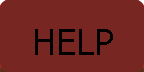
<style>
.page{position:relative;width:144px;height:72px;background:#782621}
.page>*{position:absolute;margin:0}
.t1{font:36px "Tahoma";color:#000000}
</style>
<div class="page">
<p class="t1" style="left:35px;top:29px;width:78px;height:26px">HELP</p>
</div>
